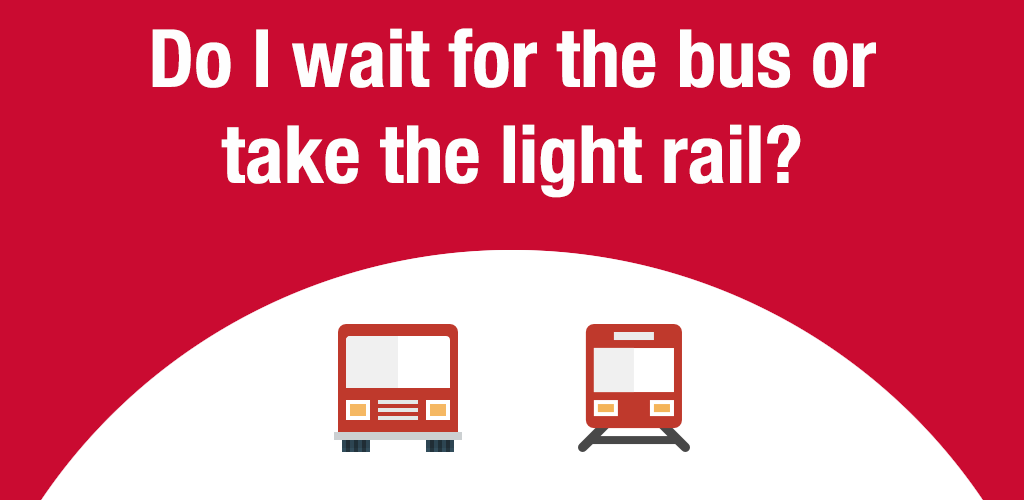
<style>
.page{position:relative;width:1024px;height:500px;background:#ca0b31}
.page>*{position:absolute;margin:0}
.t1{font:80px "HelveticaNeue-CondensedBold";color:#fefefe}
</style>
<div class="page">
<p class="t1" style="left:152px;top:28px;width:724px;height:170px;text-align:center">Do I wait for the bus or take the light rail?</p>
</div>
